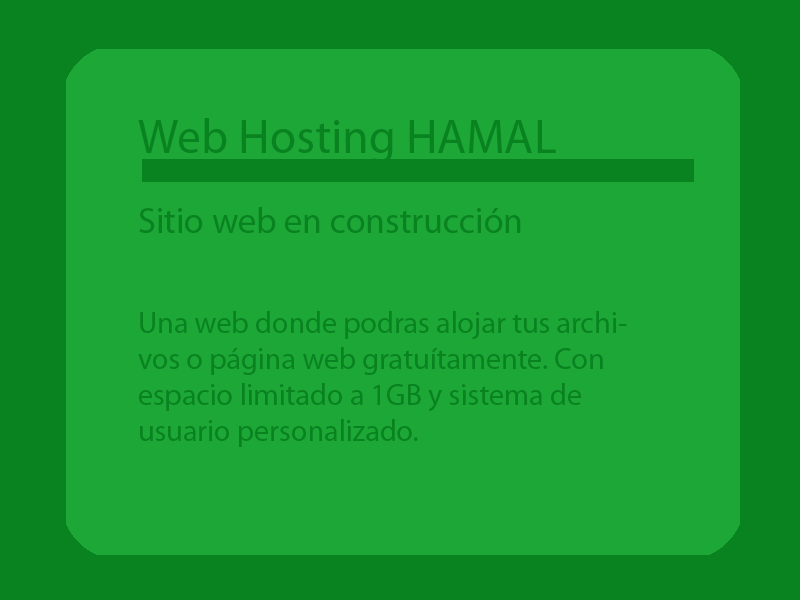
<style>
.page{position:relative;width:800px;height:600px;background:#1da737}
.page>*{position:absolute;margin:0}
.t1{font:48px "MyriadPro-Regular";color:#098220}
.t2{font:30px "MyriadPro-Regular";color:#098220}
.t3{font:36px "MyriadPro-Regular";color:#098220}
</style>
<div class="page">
<p class="t1" style="left:138px;top:118px;width:418px;height:45px">Web Hosting HAMAL</p>
<p class="t2" style="left:138px;top:207px;width:489px;height:240px"><span class="t3">Sitio web en construcción<br><br></span><br>Una web donde podras alojar tus archivos o página web gratuítamente. Con espacio limitado a 1GB y sistema de usuario personalizado.</p>
</div>
